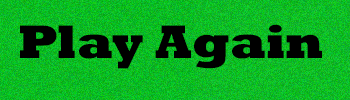
<style>
.page{position:relative;width:350px;height:100px}
.page>*{position:absolute;margin:0}
.t1{font:48.1px "Rockwell-ExtraBold";color:#000000}
</style>
<div class="page">
<p class="t1" style="left:20px;top:24px;width:302px;height:45px">Play Again</p>
</div>
